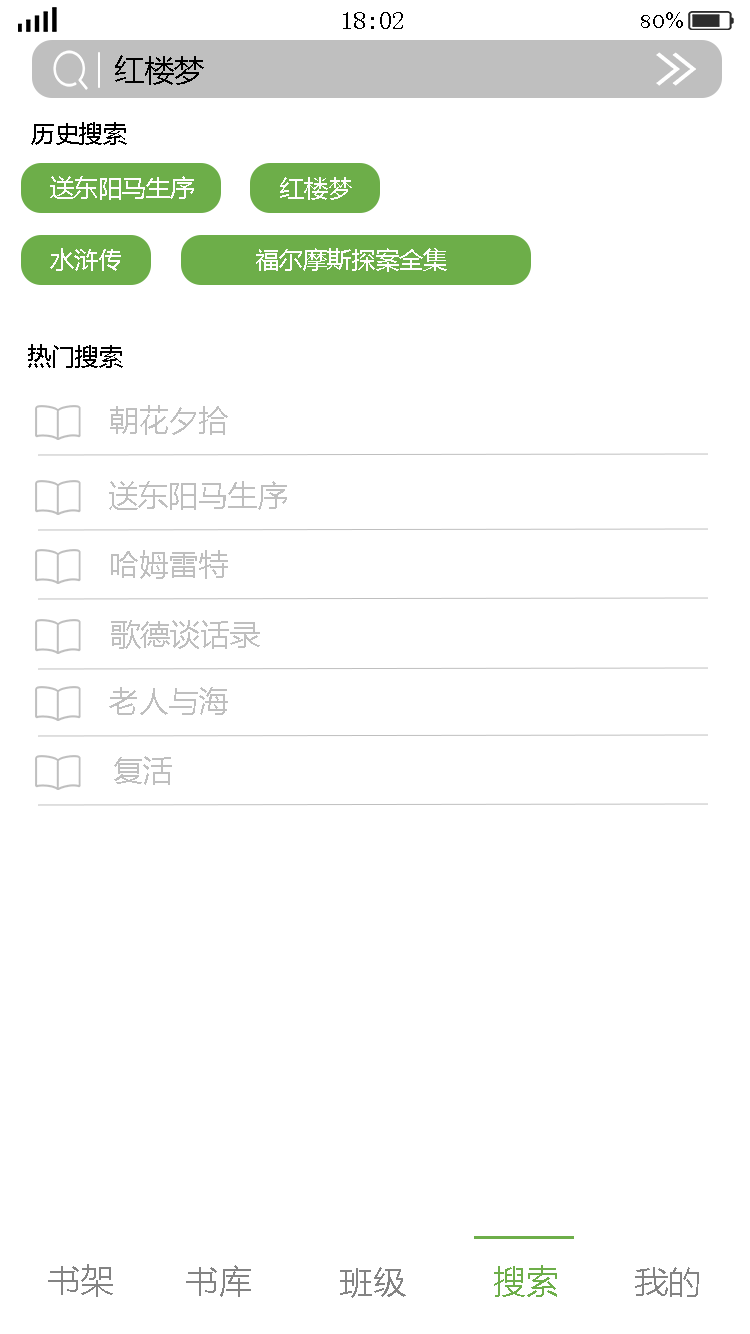
<style>
.page{position:relative;width:750px;height:1334px;background:#ffffff}
.page>*{position:absolute;margin:0}
.t1{font:25px "SimSun";color:#000000}
.t2{font:25px "BellMT";color:#000000}
.t3{font:30px "MicrosoftYaHei";color:#000000}
.t4{font:24px "MicrosoftYaHei";color:#000000}
.t5{font:24px "MicrosoftYaHei";color:#fffefe}
.t6{font:30px "MicrosoftYaHei";color:#bfbfbf}
.t7{font:33.3px "MicrosoftYaHei";color:#838383}
.t8{font:33.3px "MicrosoftYaHei";color:#6dae49}
</style>
<div class="page">
<p class="t1" style="left:343px;top:12px;width:60px;height:17px">18:02</p>
<p class="t2" style="left:641px;top:12px;width:42px;height:16px">80%</p>
<p class="t3" style="left:115px;top:55px;width:89px;height:30px">红楼梦</p>
<p class="t4" style="left:31px;top:122px;width:96px;height:23px">历史搜索</p>
<p class="t5" style="left:50px;top:176px;width:144px;height:24px">送东阳马生序</p>
<p class="t5" style="left:280px;top:177px;width:72px;height:23px">红楼梦</p>
<p class="t5" style="left:50px;top:248px;width:71px;height:23px">水浒传</p>
<p class="t5" style="left:256px;top:248px;width:191px;height:24px">福尔摩斯探案全集</p>
<p class="t4" style="left:28px;top:344px;width:95px;height:24px">热门搜索</p>
<p class="t6" style="left:110px;top:405px;width:118px;height:30px">朝花夕拾</p>
<p class="t6" style="left:109px;top:481px;width:178px;height:29px">送东阳马生序</p>
<p class="t6" style="left:111px;top:550px;width:117px;height:29px">哈姆雷特</p>
<p class="t6" style="left:111px;top:620px;width:149px;height:29px">歌德谈话录</p>
<p class="t6" style="left:109px;top:687px;width:119px;height:28px">老人与海</p>
<p class="t6" style="left:114px;top:756px;width:58px;height:29px">复活</p>
<p class="t7" style="left:48px;top:1264px;width:65px;height:33px">书架</p>
<p class="t7" style="left:186px;top:1265px;width:65px;height:32px">书库</p>
<p class="t8" style="left:494px;top:1265px;width:63px;height:32px">搜索</p>
<p class="t7" style="left:340px;top:1267px;width:66px;height:31px">班级</p>
<p class="t7" style="left:635px;top:1267px;width:64px;height:30px">我的</p>
</div>
